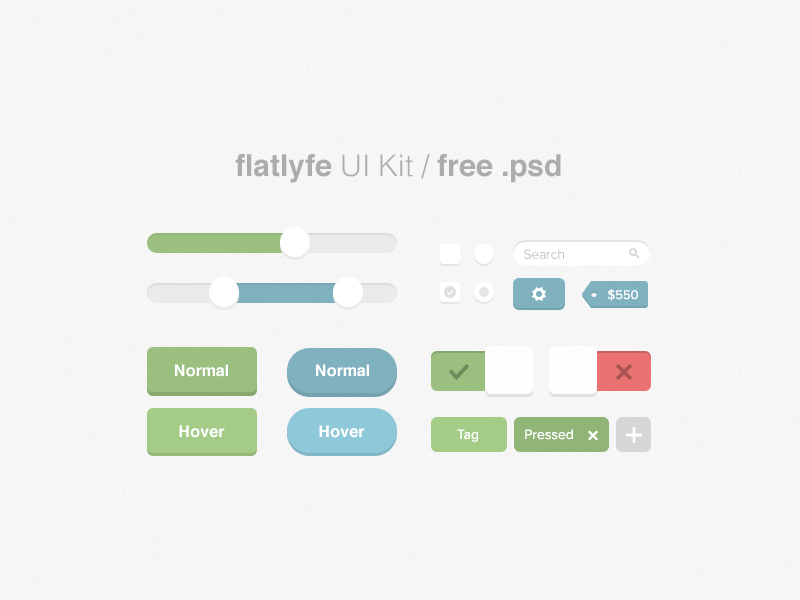
<style>
.page{position:relative;width:800px;height:600px;background:#f7f7f7}
.page>*{position:absolute;margin:0}
.t1{font:30px "Helvetica-Bold";color:#acacac}
.t2{font:30px "Helvetica-Light";color:#acacac}
.t3{font:14px "ProximaNova-Regular";letter-spacing:-0.02em;color:#c2c2c2}
.t4{font:13px "ProximaNova-Regular";color:#ffffff}
.t5{font:16px "Helvetica-Bold";color:#ffffff}
.t6{font:14px "ProximaNova-Regular";color:#ffffff}
</style>
<div class="page">
<p class="t1" style="left:235px;top:153px;width:326px;height:30px">flatlyfe<span class="t2"> UI Kit / </span>free .psd</p>
<p class="t3" style="left:524px;top:249px;width:40px;height:10px">Search</p>
<p class="t4" style="left:608px;top:289px;width:30px;height:12px">$550</p>
<p class="t5" style="left:175px;top:364px;width:53px;height:13px">Normal</p>
<p class="t5" style="left:316px;top:364px;width:53px;height:13px">Normal</p>
<p class="t5" style="left:179px;top:425px;width:46px;height:13px">Hover</p>
<p class="t5" style="left:319px;top:425px;width:46px;height:13px">Hover</p>
<p class="t6" style="left:457px;top:429px;width:21px;height:13px">Tag</p>
<p class="t6" style="left:525px;top:429px;width:48px;height:11px">Pressed</p>
</div>
